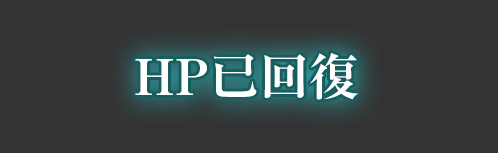
<style>
.page{position:relative;width:498px;height:153px;background:#333333}
.page>*{position:absolute;margin:0}
.t1{font:50px "RyuminPr6N-ExBold";color:#ffffff}
</style>
<div class="page">
<p class="t1" style="left:135px;top:53px;width:223px;height:47px">HP已回復</p>
</div>
